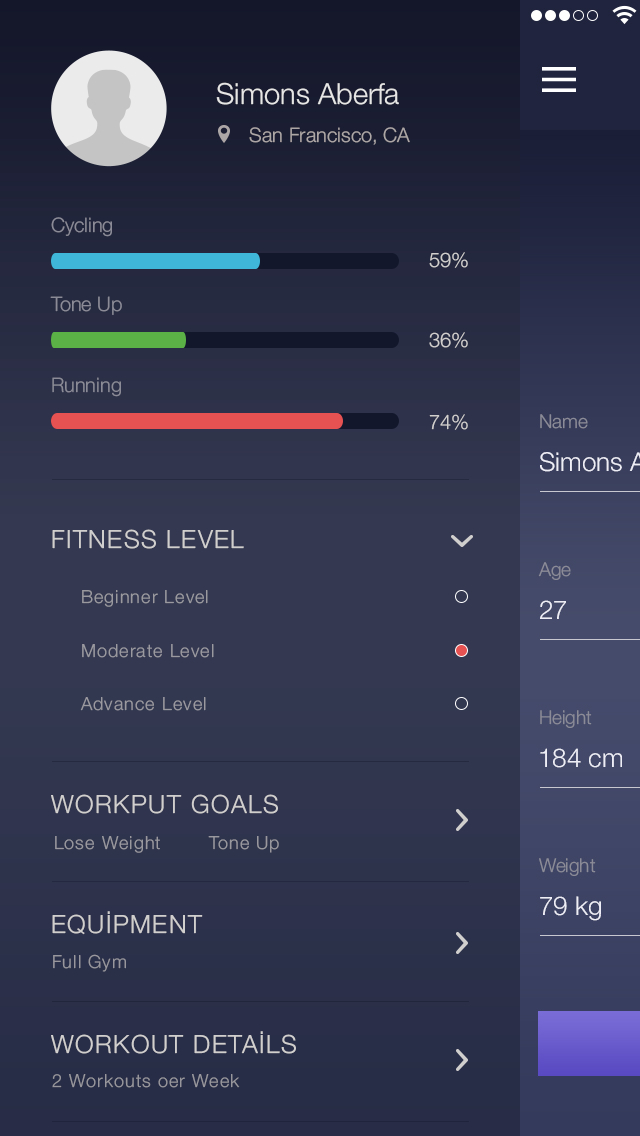
<style>
.page{position:relative;width:640px;height:1136px}
.page>*{position:absolute;margin:0}
.t1{font:29px "HelveticaNeue-Light";color:#e6e6e6}
.t2{font:20px "HelveticaNeue-Light";color:#ada6a6}
.t3{font:20px "HelveticaNeue-Light";color:#8b8b97}
.t4{font:20.1px "HelveticaNeue-Light";color:#d1cece}
.t5{font:25px "HelveticaNeue-Light";letter-spacing:0.06em;color:#d1cece}
.t6{font:18px "HelveticaNeue-Light";letter-spacing:0.06em;color:#9a99a0}
.t7{font:18px "HelveticaNeue-Light";letter-spacing:0.06em;color:#99989f}
.t8{font:18px "HelveticaNeue-Light";letter-spacing:0.06em;color:#98979e}
.t9{font:18px "HelveticaNeue-Light";letter-spacing:0.06em;color:#97969d}
</style>
<div class="page">
<p class="t1" style="left:216px;top:82px;width:183px;height:23px">Simons Aberfa</p>
<p class="t2" style="left:249px;top:127px;width:161px;height:18px">San Francisco, CA</p>
<p class="t3" style="left:51px;top:217px;width:61px;height:20px">Cycling</p>
<p class="t4" style="left:429px;top:252px;width:39px;height:16px">59%</p>
<p class="t3" style="left:50px;top:296px;width:72px;height:19px">Tone Up</p>
<p class="t4" style="left:429px;top:332px;width:39px;height:16px">36%</p>
<p class="t3" style="left:52px;top:377px;width:69px;height:20px">Running</p>
<p class="t4" style="left:429px;top:414px;width:39px;height:16px">74%</p>
<p class="t5" style="left:52px;top:529px;width:192px;height:20px">FITNESS LEVEL</p>
<p class="t6" style="left:82px;top:590px;width:126px;height:17px">Beginner Level</p>
<p class="t6" style="left:82px;top:644px;width:132px;height:14px">Moderate Level</p>
<p class="t6" style="left:80px;top:697px;width:126px;height:14px">Advance Level</p>
<p class="t5" style="left:51px;top:794px;width:227px;height:20px">WORKPUT GOALS</p>
<p class="t7" style="left:55px;top:836px;width:105px;height:17px">Lose Weight</p>
<p class="t7" style="left:208px;top:836px;width:71px;height:17px">Tone Up</p>
<p class="t5" style="left:52px;top:911px;width:151px;height:24px">EQUİPMENT</p>
<p class="t8" style="left:53px;top:954px;width:73px;height:18px">Full Gym</p>
<p class="t5" style="left:51px;top:1031px;width:245px;height:23px">WORKOUT DETAİLS</p>
<p class="t9" style="left:52px;top:1074px;width:188px;height:14px">2 Workouts oer Week</p>
</div>
